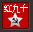
<style>
.page{position:relative;width:33px;height:32px;background:#c50000}
.page>*{position:absolute;margin:0}
.t1{font:10.4px "SimSun";letter-spacing:-0.25em;color:#ffffff}
</style>
<div class="page">
<p class="t1" style="left:4px;top:4px;width:24px;height:9px">红九十</p>
</div>
